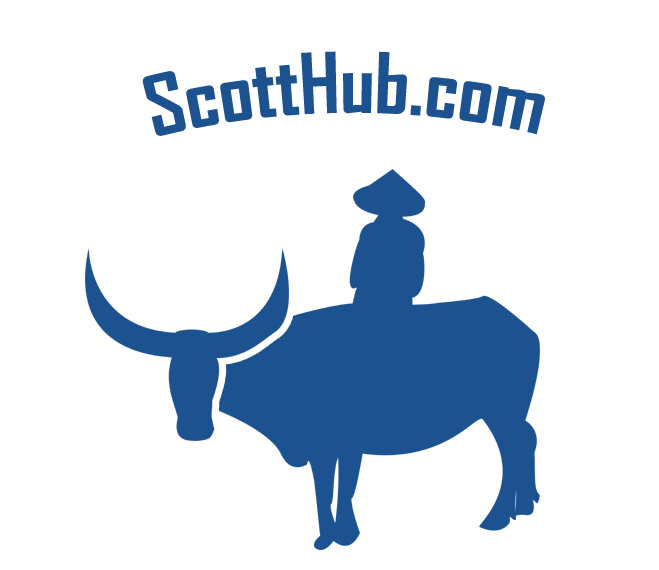
<style>
.page{position:relative;width:659px;height:570px;background:#ffffff}
.page>*{position:absolute;margin:0}
.t1{font:80px "AgencyFB-Bold";color:#1c5290}
</style>
<div class="page">
<p class="t1" style="left:142px;top:51px;width:403px;height:85px">ScottHub.com</p>
</div>
